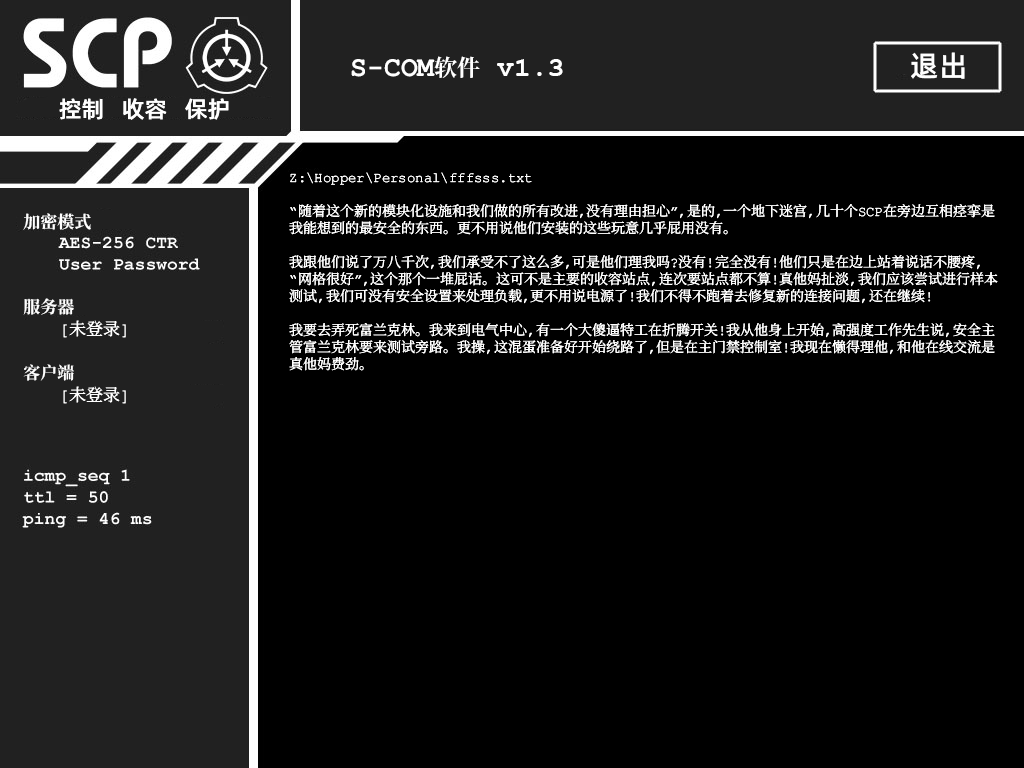
<style>
.page{position:relative;width:1024px;height:768px;background:#000000}
.page>*{position:absolute;margin:0}
.t1{font:29px "AlibabaPuHuiTiM";color:#ffffff}
.t2{font:28px "ContainmentBreach-Bold";color:#ffffff}
.t3{font:23px "ContainmentBreach-Bold";color:#ffffff}
.t4{font:28px "CourierNewPS-BoldMT";color:#ffffff}
.t5{font:23px "AlibabaPuHuiTiM";color:#ffffff}
.t6{font:14px/17px "ContainmentBreach-Regular";color:#ffffff}
.t7{font:17px/18px "ContainmentBreach-Regular";color:#ffffff}
.t8{font:17px/17px "ContainmentBreach-Bold";color:#ffffff}
.t9{font:17px/22px "ContainmentBreach-Bold";color:#ffffff}
.t10{font:17px/22px "ContainmentBreach-Regular";color:#ffffff}
</style>
<div class="page">
<p class="t1" style="left:911px;top:52px;width:54px;height:27px">退出</p>
<p class="t2" style="left:351px;top:56px;width:212px;height:22px">S-COM<span class="t3">软件 </span><span class="t4">v1.3</span></p>
<p class="t5" style="left:59px;top:98px;width:170px;height:22px">控制   收容   保护</p>
<p class="t6" style="left:289px;top:172px;width:709px;height:199px">Z:\Hopper\Personal\ｆffsss.txt<br><br>“随着这个新的模块化设施和我们做的所有改进，没有理由担心”，是的，一个地下迷宫，几十个SCP在旁边互相痉挛是<br>我能想到的最安全的东西。更不用说他们安装的这些玩意几乎屁用没有。<br><br>我跟他们说了万八千次，我们承受不了这么多，可是他们理我吗？没有！完全没有！他们只是在边上站着说话不腰疼，<br>“网格很好”，这个那个一堆屁话。这可不是主要的收容站点，连次要站点都不算！真他妈扯淡，我们应该尝试进行样本<br>测试，我们可没有安全设置来处理负载，更不用说电源了！我们不得不跑着去修复新的连接问题，还在继续！<br><br>我要去弄死富兰克林。我来到电气中心，有一个大傻逼特工在折腾开关！我从他身上开始，高强度工作先生说，安全主<br>管富兰克林要来测试旁路。我操，这混蛋准备好开始绕路了，但是在主门禁控制室！我现在懒得理他，和他在线交流是<br>真他妈费劲。</p>
<p class="t7" style="left:23px;top:213px;width:103px;height:191px"><span class="t8">加密模式<br><br><br><br><br></span><span class="t9">服务器<br> </span>[未登录]<br><br><span class="t9">客户端<br> </span><span class="t10">[未登录]</span></p>
</div>
